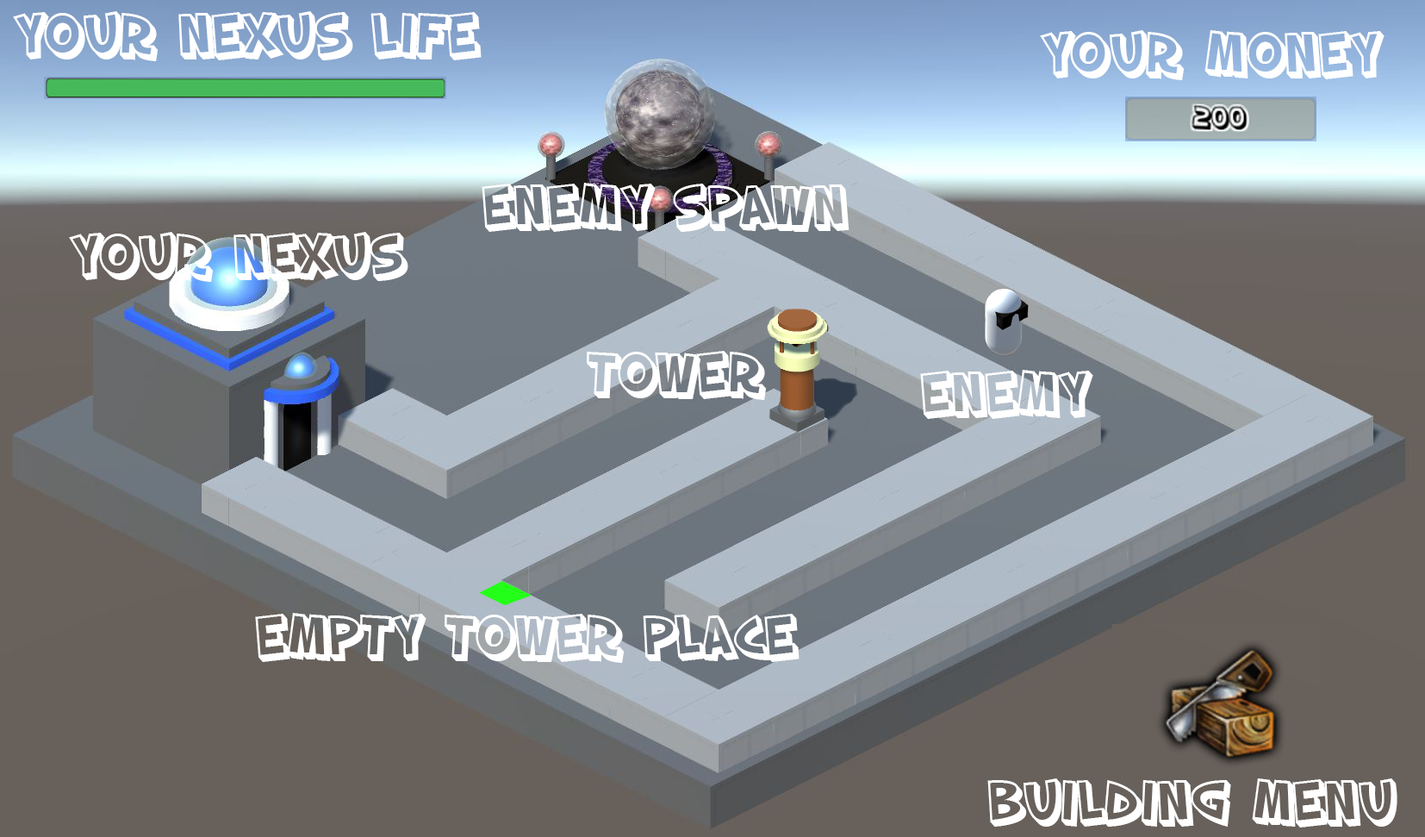
<style>
.page{position:relative;width:1425px;height:837px}
.page>*{position:absolute;margin:0}
.t1{font:55.1px "SFSlapstickComicShaded";letter-spacing:-0.025em;color:#ffffff}
</style>
<div class="page">
<p class="t1" style="left:13px;top:11px;width:469px;height:50px">Your nexus life</p>
<p class="t1" style="left:1040px;top:30px;width:345px;height:50px">Your Money</p>
<p class="t1" style="left:69px;top:232px;width:339px;height:50px">Your Nexus</p>
<p class="t1" style="left:587px;top:351px;width:180px;height:49px">tower</p>
<p class="t1" style="left:920px;top:370px;width:173px;height:49px">enemy</p>
<p class="t1" style="left:255px;top:613px;width:545px;height:50px">Empty tower place</p>
<p class="t1" style="left:987px;top:778px;width:411px;height:49px">Building menu</p>
</div>
